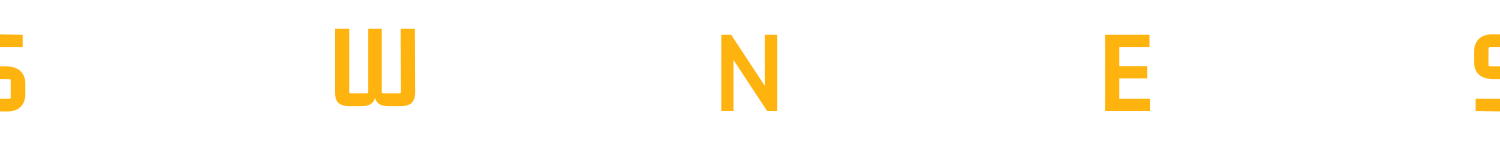
<style>
.page{position:relative;width:1500px;height:150px;background:#ffffff}
.page>*{position:absolute;margin:0}
.t1{font:120px "GemunuLibre-Bold";letter-spacing:-0.05em;color:#ffb30f}
</style>
<div class="page">
<p class="t1" style="left:335px;top:28px;width:81px;height:79px">W</p>
<p class="t1" style="left:721px;top:34px;width:57px;height:77px">N</p>
<p class="t1" style="left:1105px;top:34px;width:46px;height:77px">E</p>
</div>
